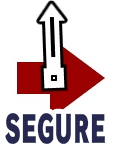
<style>
.page{position:relative;width:126px;height:150px;background:#ffffff}
.page>*{position:absolute;margin:0}
.t1{font:37.3px "RodinNTLGPro-UB";color:#272850;scale:0.6 1}
</style>
<div class="page">
<p class="t1" style="left:5px;top:113px;width:100px;height:31px">SEGURE</p>
</div>
